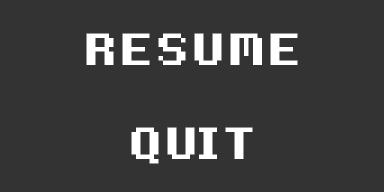
<style>
.page{position:relative;width:384px;height:192px;background:#333333}
.page>*{position:absolute;margin:0}
.t1{font:72px "8-Bit-Madness";color:#ffffff}
</style>
<div class="page">
<p class="t1" style="left:86px;top:33px;width:212px;height:32px">RESUME</p>
<p class="t1" style="left:131px;top:127px;width:122px;height:37px">QUIT</p>
</div>
